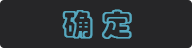
<style>
.page{position:relative;width:192px;height:48px;background:#262628}
.page>*{position:absolute;margin:0}
.t1{font:30px "STCaiyun";color:#56a8bf;font-weight:bold}
</style>
<div class="page">
<p class="t1" style="left:62px;top:9px;width:70px;height:30px">确 定</p>
</div>
